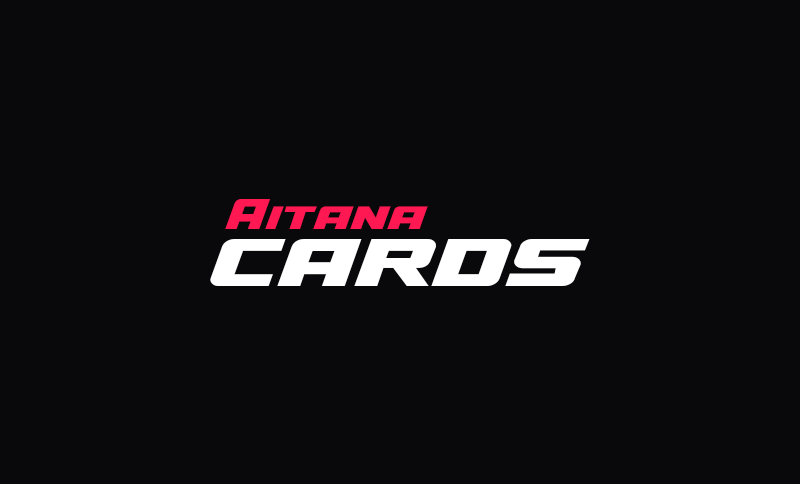
<style>
.page{position:relative;width:800px;height:484px;background:#09090b}
.page>*{position:absolute;margin:0}
.t1{font:48.6px/57px "A4SPEEDBold";color:#ff1852}
.t2{font:101.3px/57px "A4SPEEDBold";color:#ffffff}
</style>
<div class="page">
<p class="t1" style="left:210px;top:199px;width:380px;height:87px">Aitana <br><span class="t2">cards</span></p>
</div>
